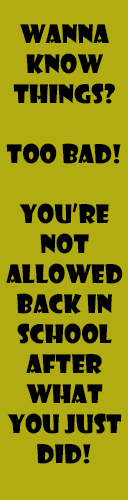
<style>
.page{position:relative;width:128px;height:500px;background:#b1ac11}
.page>*{position:absolute;margin:0}
.t1{font:25px "ShowcardGothic-Reg";color:#000000}
</style>
<div class="page">
<p class="t1" style="left:6px;top:24px;width:117px;height:440px;text-align:center">Wanna<br>know things?<br><br>Too Bad!<br><br>You’re not allowed back in school after what you just did!</p>
</div>
